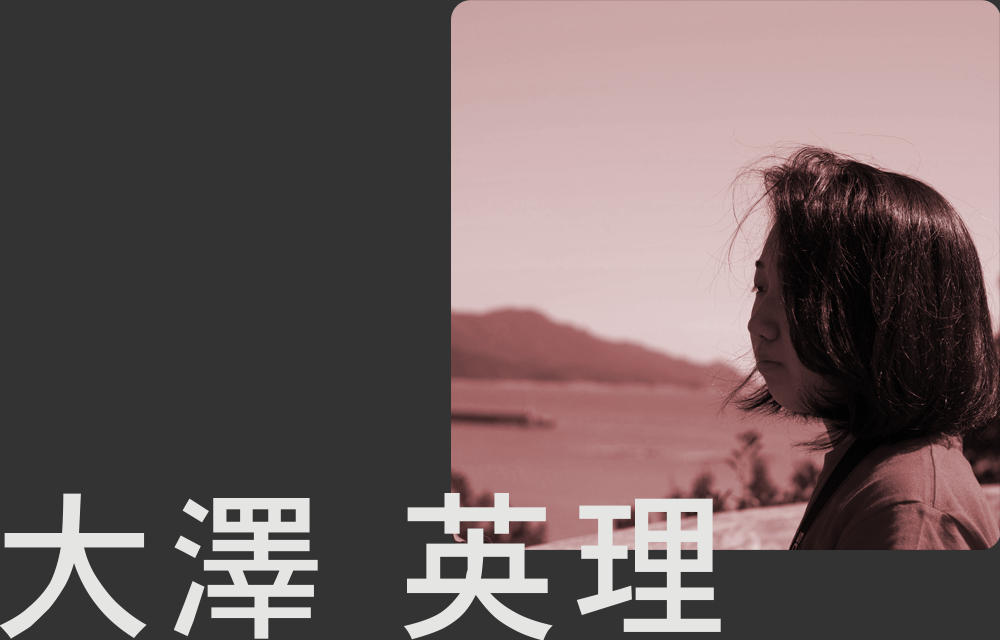
<style>
.page{position:relative;width:1000px;height:640px;background:#333333}
.page>*{position:absolute;margin:0}
.t1{font:160px "Osaka";letter-spacing:0.08em;color:#e5e5e4}
</style>
<div class="page">
<p class="t1" style="left:0px;top:493px;width:721px;height:148px">大澤 英理</p>
</div>
